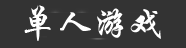
<style>
.page{position:relative;width:186px;height:48px;background:#333333}
.page>*{position:absolute;margin:0}
.t1{font:36px "STXingkai";color:#ffffff}
</style>
<div class="page">
<p class="t1" style="left:24px;top:5px;width:137px;height:36px">单人游戏</p>
</div>
